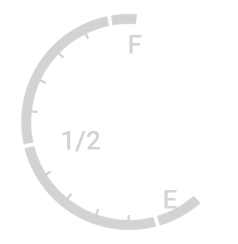
<style>
.page{position:relative;width:238px;height:244px;background:#ffffff}
.page>*{position:absolute;margin:0}
.t1{font:25px "Roboto-Regular";color:#c8c8c8;font-weight:bold}
</style>
<div class="page">
<p class="t1" style="left:129px;top:35px;width:13px;height:19px">F</p>
<p class="t1" style="left:62px;top:131px;width:38px;height:21px">1/2</p>
<p class="t1" style="left:164px;top:190px;width:13px;height:19px">E</p>
</div>
